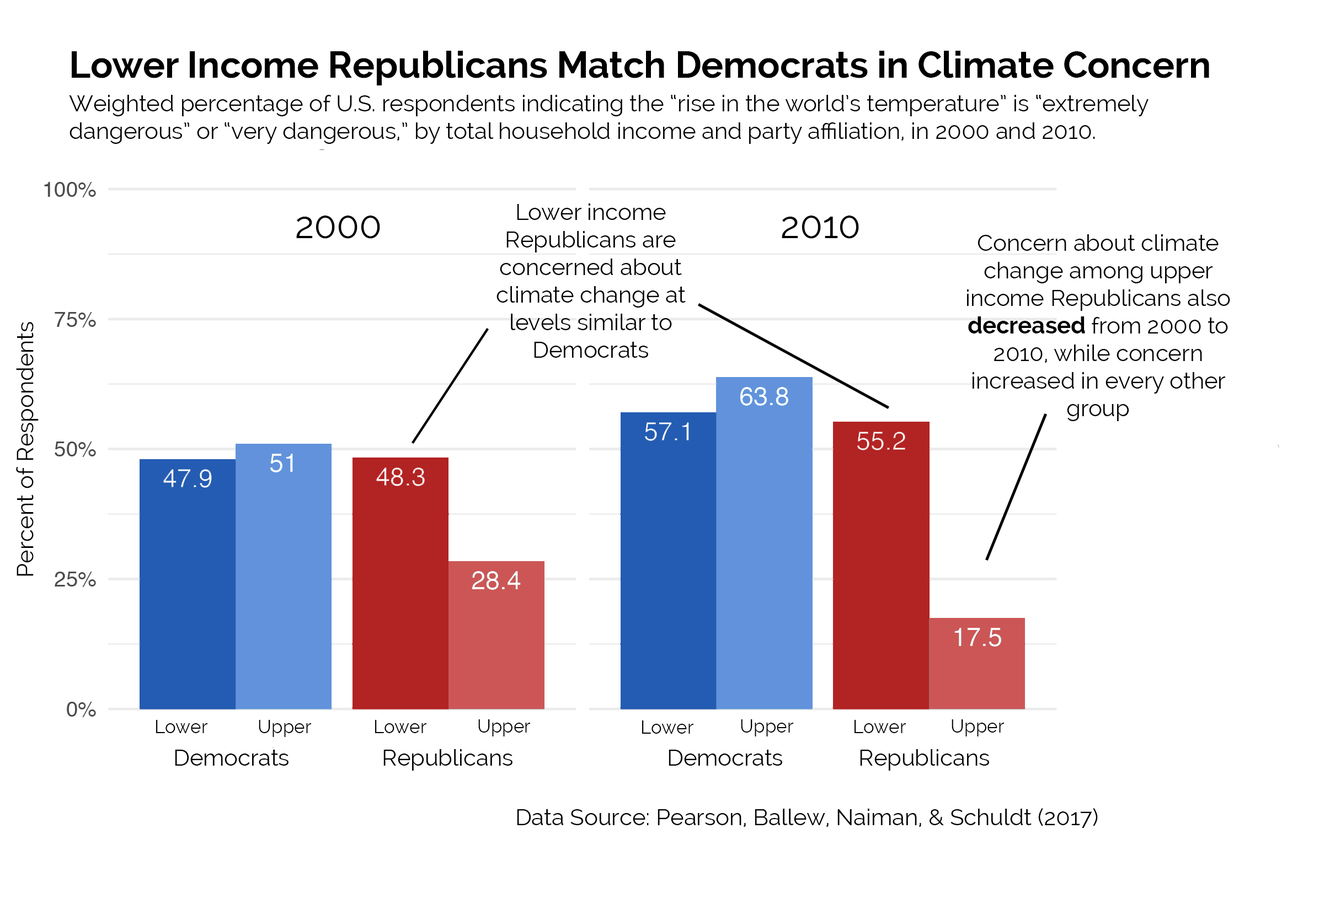
<style>
.page{position:relative;width:1319px;height:904px;background:#ffffff}
.page>*{position:absolute;margin:0}
.t1{font:36.8px "Raleway-Bold";color:#000000}
.t2{font:23px "Raleway";color:#000000}
.t3{font:36.8px "Raleway";color:#000000}
.t4{font:23px "Raleway-Bold";color:#000000}
.t5{font:18.4px "Raleway";color:#000000}
</style>
<div class="page">
<p class="t1" style="left:72px;top:51px;width:1137px;height:34px">Lower Income Republicans Match Democrats in Climate Concern</p>
<p class="t2" style="left:69px;top:95px;width:1079px;height:49px">Weighted percentage of U.S. respondents indicating the “rise in the world’s temperature” is “extremely dangerous” or “very dangerous,” by total household income and party affiliation, in 2000 and 2010.</p>
<p class="t2" style="left:496px;top:203px;width:189px;height:155px;text-align:center">Lower income Republicans are concerned about climate change at levels similar to Democrats</p>
<p class="t3" style="left:296px;top:216px;width:84px;height:23px">2000</p>
<p class="t3" style="left:781px;top:216px;width:78px;height:23px">2010</p>
<p class="t2" style="left:967px;top:234px;width:263px;height:187px;text-align:center">Concern about climate change among upper income Republicans also <span class="t4">decreased </span>from 2000 to 2010, while concern increased in every other group</p>
<p class="t2" style="left:16px;top:322px;width:23px;height:254px;rotate:-90deg">Percent of Respondents</p>
<p class="t5" style="left:156px;top:720px;width:51px;height:13px">Lower Income</p>
<p class="t5" style="left:259px;top:720px;width:52px;height:17px">Upper</p>
<p class="t5" style="left:375px;top:720px;width:51px;height:13px">Lower</p>
<p class="t5" style="left:478px;top:720px;width:52px;height:17px">Upper</p>
<p class="t5" style="left:642px;top:721px;width:51px;height:13px">Lower</p>
<p class="t5" style="left:741px;top:720px;width:52px;height:17px">Upper</p>
<p class="t5" style="left:854px;top:720px;width:51px;height:13px">Lower</p>
<p class="t5" style="left:951px;top:720px;width:53px;height:17px">Upper</p>
<p class="t2" style="left:175px;top:750px;width:113px;height:16px">Democrats</p>
<p class="t2" style="left:383px;top:749px;width:129px;height:22px">Republicans</p>
<p class="t2" style="left:668px;top:750px;width:114px;height:16px">Democrats</p>
<p class="t2" style="left:860px;top:749px;width:129px;height:22px">Republicans</p>
<p class="t2" style="left:517px;top:808px;width:580px;height:20px">Data Source: Pearson, Ballew, Naiman, &amp; Schuldt (2017)</p>
</div>
